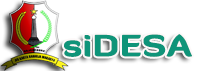
<style>
.page{position:relative;width:200px;height:71px;background:#ffffff}
.page>*{position:absolute;margin:0}
.t1{font:28.8px "DiavloBold-Regular";color:#0f9479;font-weight:bold;scale:1.25 1}
</style>
<div class="page">
<p class="t1" style="left:64px;top:34px;width:128px;height:23px">siDESA</p>
</div>
